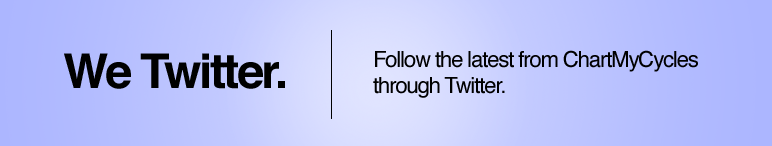
<style>
.page{position:relative;width:772px;height:146px}
.page>*{position:absolute;margin:0}
.t1{font:48px "Helvetica-Bold";letter-spacing:-0.05em;color:#000000}
.t2{font:22px "Helvetica";letter-spacing:-0.05em;color:#000000}
</style>
<div class="page">
<p class="t1" style="left:64px;top:53px;width:221px;height:36px">We Twitter.</p>
<p class="t2" style="left:373px;top:50px;width:325px;height:48px">Follow the latest from ChartMyCycles<br>through Twitter.</p>
</div>
